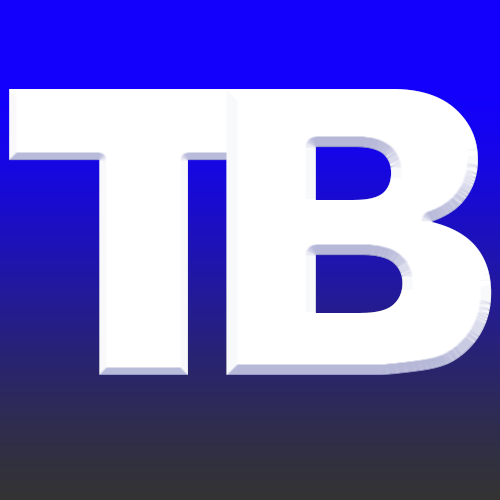
<style>
.page{position:relative;width:500px;height:500px;background:#ffffff}
.page>*{position:absolute;margin:0}
.t1{font:400px "Arial-Black";color:#ffffff}
</style>
<div class="page">
<p class="t1" style="left:9px;top:89px;width:270px;height:286px">T</p>
<p class="t1" style="left:226px;top:89px;width:266px;height:286px">B</p>
</div>
